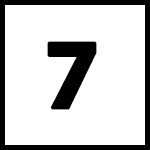
<style>
.page{position:relative;width:150px;height:150px;background:#ffffff}
.page>*{position:absolute;margin:0}
.t1{font:100px "MyriadPro-Bold";letter-spacing:0.025em;color:#000000;text-transform:uppercase;font-weight:bold}
</style>
<div class="page">
<p class="t1" style="left:47px;top:41px;width:50px;height:69px">7</p>
</div>
